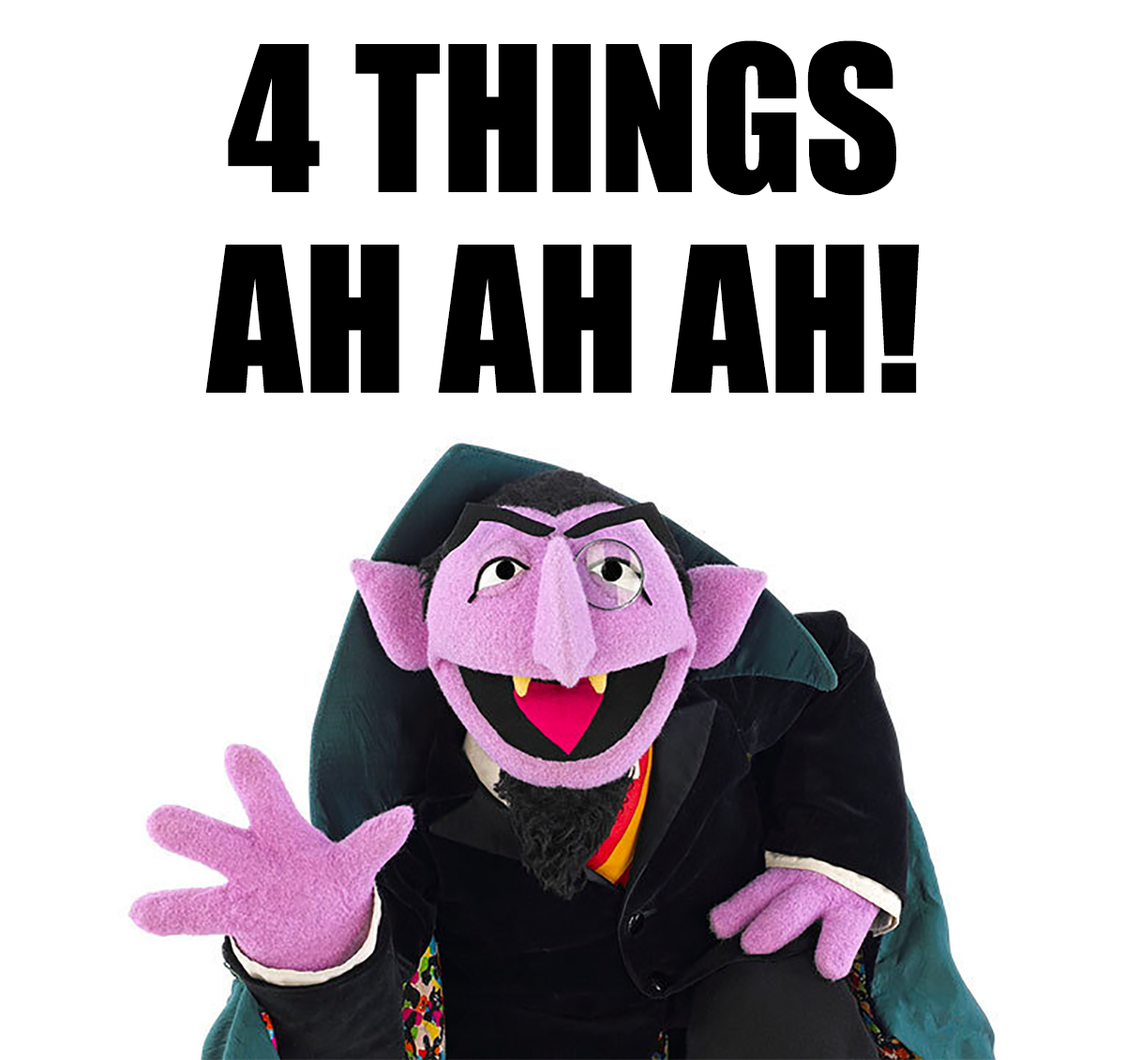
<style>
.page{position:relative;width:1125px;height:1060px;background:#ffffff}
.page>*{position:absolute;margin:0}
.t1{font:187.5px "Impact";color:#000000}
</style>
<div class="page">
<p class="t1" style="left:228px;top:40px;width:669px;height:156px">4 THINGS</p>
<p class="t1" style="left:205px;top:245px;width:715px;height:148px">AH AH AH!</p>
</div>
